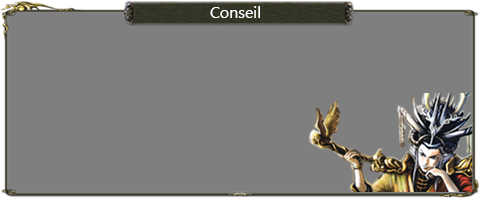
<style>
.page{position:relative;width:480px;height:200px;background:#7f7f7f}
.page>*{position:absolute;margin:0}
.t1{font:16px "LaoUI";color:#fefefe}
</style>
<div class="page">
<p class="t1" style="left:210px;top:6px;width:50px;height:12px">Conseil</p>
</div>
